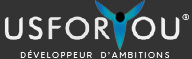
<style>
.page{position:relative;width:192px;height:59px;background:#333333}
.page>*{position:absolute;margin:0}
.t1{font:8px "Orkney-Light";letter-spacing:0.22em;color:#faf8f8}
</style>
<div class="page">
<p class="t1" style="left:182px;top:14px;width:8px;height:6px">®</p>
<p class="t1" style="left:20px;top:50px;width:150px;height:9px">DÉVELOPPEUR  D’AMBITIONS</p>
</div>
